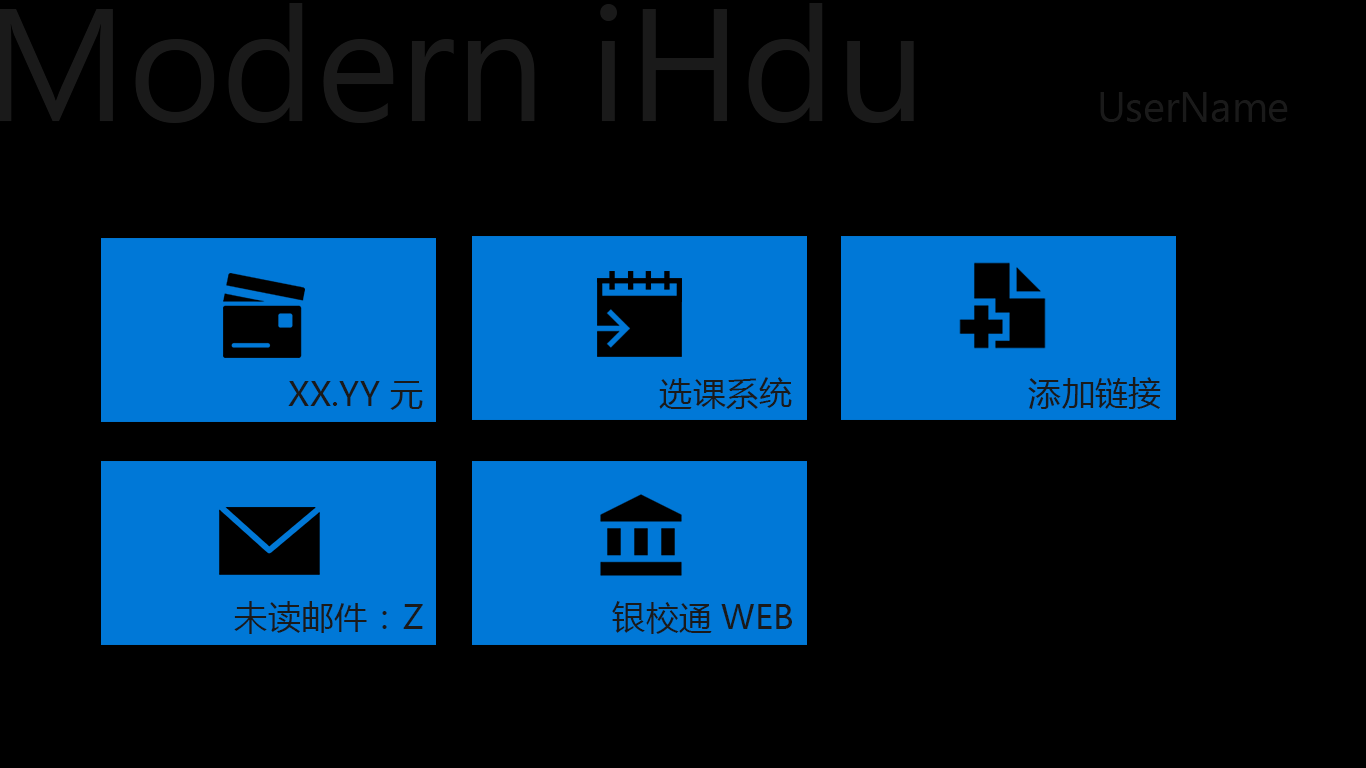
<style>
.page{position:relative;width:1366px;height:768px;background:#000000}
.page>*{position:absolute;margin:0}
.t1{font:38.4px "SegoeUI";color:#1a1a1a}
.t2{font:41.7px "SegoeUI";color:#1a1a1a}
.t3{font:33.3px "MicrosoftYaHei";color:#1a1a1a}
</style>
<div class="page">
<p class="t1" style="left:0px;top:3px;width:914px;height:120px">Modern iHdu</p>
<p class="t2" style="left:1100px;top:92px;width:188px;height:30px">UserName</p>
<p class="t3" style="left:659px;top:377px;width:133px;height:32px">选课系统</p>
<p class="t3" style="left:1028px;top:377px;width:133px;height:32px">添加链接</p>
<p class="t3" style="left:288px;top:381px;width:135px;height:29px">XX.YY 元</p>
<p class="t3" style="left:234px;top:601px;width:189px;height:33px">未读邮件： Z</p>
<p class="t3" style="left:612px;top:601px;width:180px;height:33px">银校通WEB</p>
</div>
